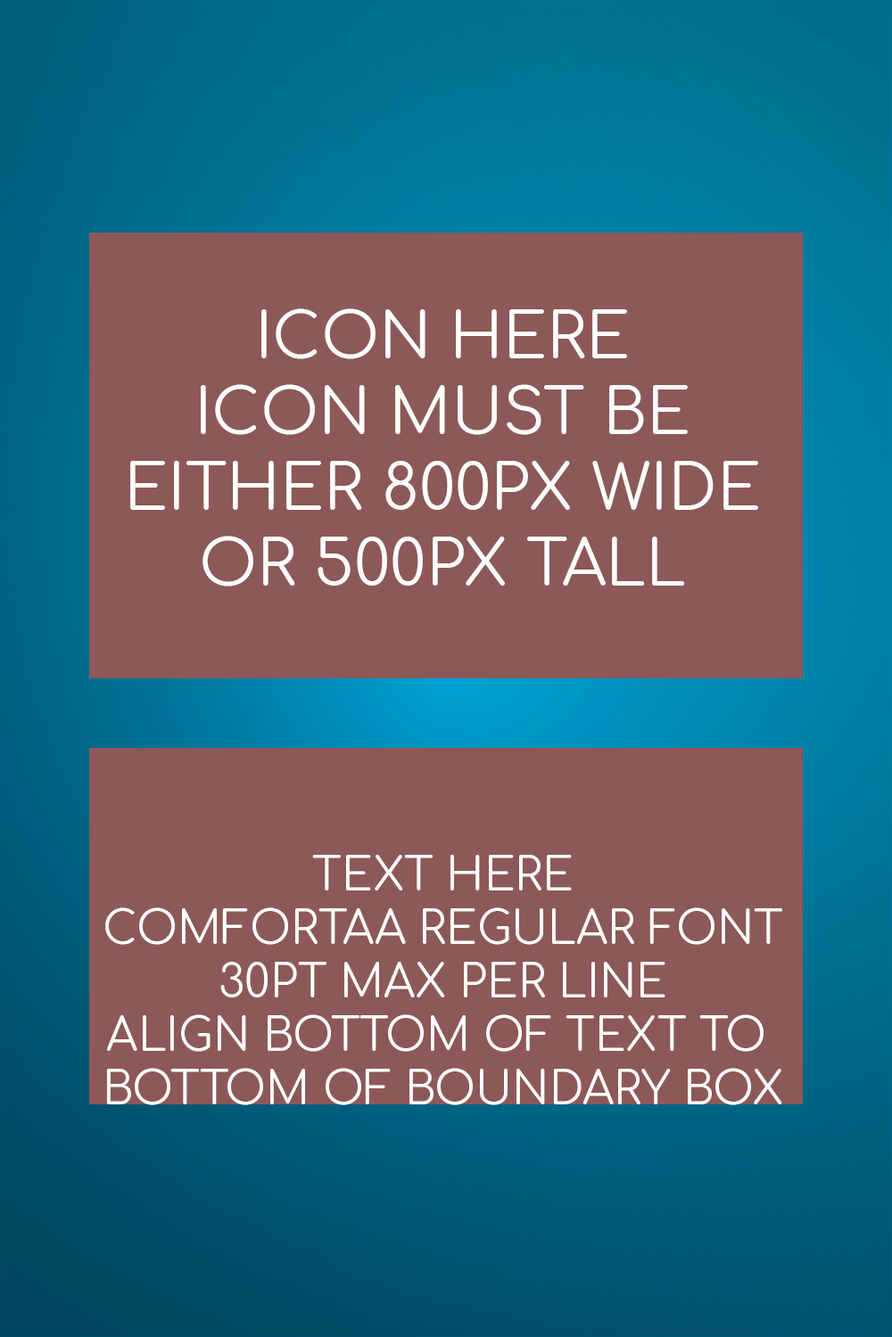
<style>
.page{position:relative;width:892px;height:1337px;background:#8d5858}
.page>*{position:absolute;margin:0}
.t1{font:63.2px "Comfortaa-Regular";color:#ffffff}
.t2{font:44.6px "Comfortaa-Regular";color:#ffffff}
</style>
<div class="page">
<p class="t1" style="left:130px;top:308px;width:628px;height:279px;text-align:center">ICON HERE<br>ICON MUST BE<br>EITHER 800PX WIDE<br>OR 500PX TALL</p>
<p class="t2" style="left:105px;top:855px;width:677px;height:251px;text-align:center">TEXT HERE<br>COMFORTAA REGULAR FONT<br>30PT MAX PER LINE<br>ALIGN BOTTOM OF TEXT TO <br>BOTTOM OF BOUNDARY BOX</p>
</div>
